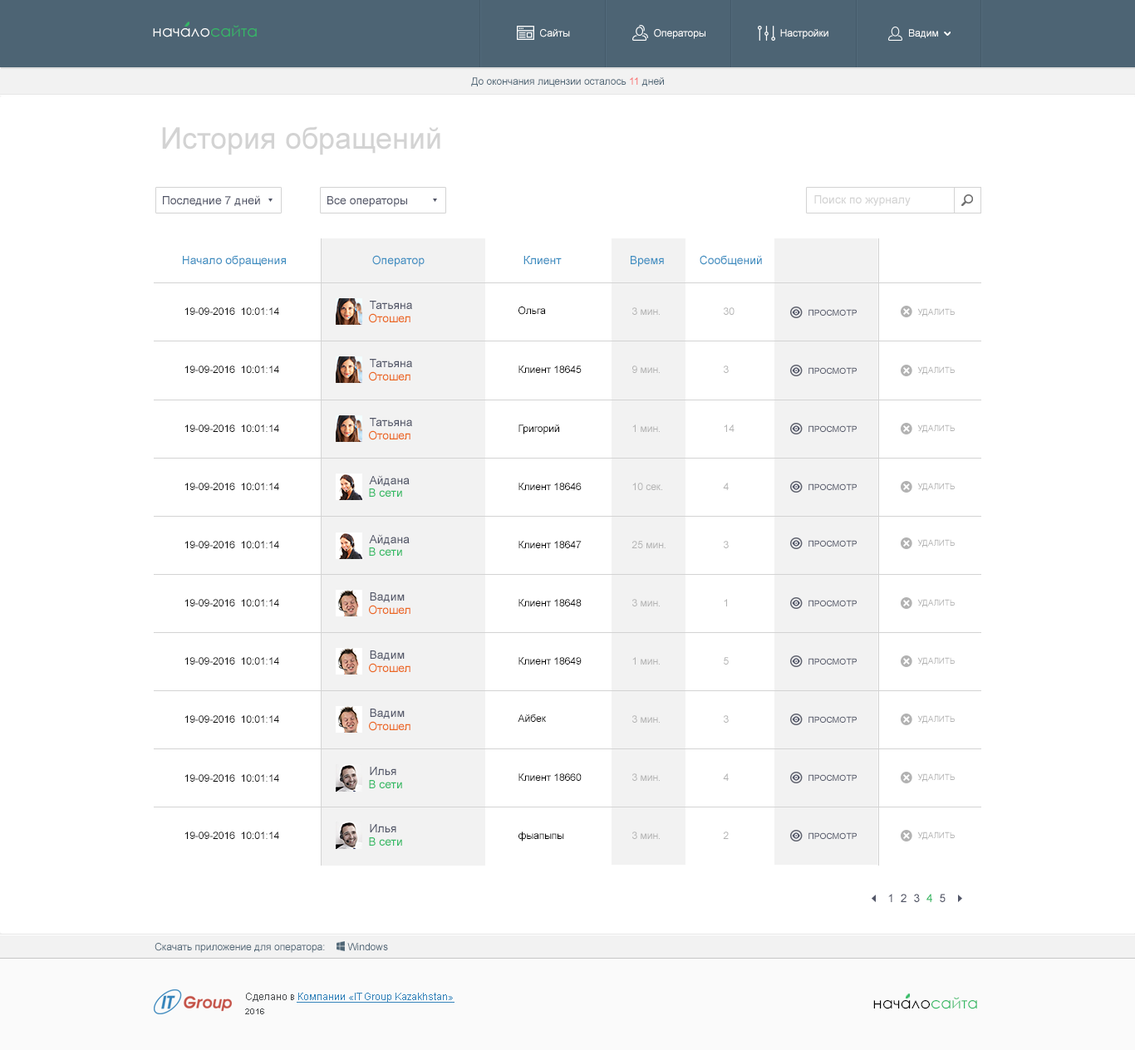
<style>
.page{position:relative;width:1135px;height:1050px;background:#ffffff}
.page>*{position:absolute;margin:0}
.t1{font:15.4px "CenturyGothic";color:#ffffff}
.t2{font:15.4px "CenturyGothic";color:#34ba65}
.t3{font:10px "ArialMT";color:#ffffff}
.t4{font:10px "ArialMT";color:#4d6474}
.t5{font:10px "ArialMT";color:#f96969}
.t6{font:29.9px "ArialMT";color:#d3d3d3}
.t7{font:11.6px "ArialMT";color:#515567}
.t8{font:11.6px "ArialMT";color:#d3d3d3}
.t9{font:11.6px "ArialMT";color:#3d8ec1}
.t10{font:10px "ArialMT";color:#000000}
.t11{font:11.6px "ArialMT";color:#eb6821}
.t12{font:10px "ArialMT";color:#b2b2b2}
.t13{font:8.3px "ArialMT";color:#515567;scale:1.03 1}
.t14{font:8.3px "ArialMT";color:#b2b2b2}
.t15{font:11.6px "ArialMT";color:#34ba65}
.t16{font:10px "ArialMT";color:#3483ba;text-decoration:underline}
.t17{font:10px "ArialMT";color:#4a4d4f}
.t18{font:15.4px "CenturyGothic";color:#000000}
.t19{font:8.3px "Arial-BoldMT";color:#4a4d4f}
</style>
<div class="page">
<p class="t1" style="left:153px;top:25px;width:104px;height:12px">начало<span class="t2">сайта</span></p>
<p class="t3" style="left:540px;top:29px;width:30px;height:8px">Сайты</p>
<p class="t3" style="left:654px;top:29px;width:52px;height:10px">Операторы</p>
<p class="t3" style="left:780px;top:29px;width:49px;height:10px">Настройки</p>
<p class="t3" style="left:909px;top:29px;width:29px;height:9px">Вадим</p>
<p class="t4" style="left:471px;top:77px;width:193px;height:10px">До окончания лицензии осталось <span class="t5">11</span> дней</p>
<p class="t6" style="left:162px;top:126px;width:278px;height:29px">История обращений</p>
<p class="t7" style="left:163px;top:195px;width:97px;height:11px">Последние 7 дней</p>
<p class="t7" style="left:327px;top:196px;width:80px;height:11px">Все операторы</p>
<p class="t8" style="left:814px;top:195px;width:97px;height:11px">Поиск по журналу</p>
<p class="t9" style="left:183px;top:255px;width:103px;height:12px">Начало обращения</p>
<p class="t9" style="left:372px;top:255px;width:53px;height:12px">Оператор</p>
<p class="t9" style="left:524px;top:256px;width:38px;height:8px">Клиент</p>
<p class="t9" style="left:631px;top:256px;width:33px;height:11px">Время</p>
<p class="t9" style="left:700px;top:255px;width:62px;height:11px">Сообщений</p>
<p class="t7" style="left:370px;top:301px;width:42px;height:8px">Татьяна</p>
<p class="t10" style="left:184px;top:307px;width:95px;height:8px">19-09-2016  10:01:14</p>
<p class="t11" style="left:369px;top:313px;width:42px;height:10px">Отошел</p>
<p class="t10" style="left:519px;top:307px;width:27px;height:8px">Ольга</p>
<p class="t12" style="left:632px;top:307px;width:28px;height:8px">3 мин.</p>
<p class="t12" style="left:724px;top:307px;width:11px;height:8px">30</p>
<p class="t13" style="left:809px;top:309px;width:48px;height:7px">ПРОСМОТР</p>
<p class="t14" style="left:917px;top:308px;width:38px;height:9px">УДАЛИТЬ</p>
<p class="t10" style="left:184px;top:366px;width:95px;height:7px">19-09-2016  10:01:14</p>
<p class="t7" style="left:370px;top:359px;width:42px;height:8px">Татьяна</p>
<p class="t10" style="left:519px;top:366px;width:63px;height:7px">Клиент 18645</p>
<p class="t12" style="left:632px;top:366px;width:28px;height:7px">9 мин.</p>
<p class="t12" style="left:724px;top:366px;width:5px;height:7px">3</p>
<p class="t11" style="left:369px;top:371px;width:42px;height:10px">Отошел</p>
<p class="t13" style="left:809px;top:367px;width:48px;height:7px">ПРОСМОТР</p>
<p class="t14" style="left:917px;top:366px;width:38px;height:9px">УДАЛИТЬ</p>
<p class="t10" style="left:184px;top:425px;width:95px;height:7px">19-09-2016  10:01:14</p>
<p class="t7" style="left:370px;top:418px;width:42px;height:8px">Татьяна</p>
<p class="t10" style="left:519px;top:425px;width:40px;height:10px">Григорий</p>
<p class="t12" style="left:632px;top:425px;width:28px;height:7px">1 мин.</p>
<p class="t12" style="left:724px;top:425px;width:11px;height:7px">14</p>
<p class="t13" style="left:809px;top:425px;width:48px;height:7px">ПРОСМОТР</p>
<p class="t14" style="left:917px;top:425px;width:38px;height:8px">УДАЛИТЬ</p>
<p class="t11" style="left:369px;top:430px;width:42px;height:10px">Отошел</p>
<p class="t10" style="left:184px;top:483px;width:95px;height:7px">19-09-2016  10:01:14</p>
<p class="t7" style="left:369px;top:475px;width:41px;height:11px">Айдана</p>
<p class="t10" style="left:519px;top:483px;width:63px;height:7px">Клиент 18646</p>
<p class="t12" style="left:632px;top:483px;width:30px;height:7px">10 сек.</p>
<p class="t12" style="left:723px;top:483px;width:6px;height:7px">4</p>
<p class="t13" style="left:809px;top:484px;width:48px;height:6px">ПРОСМОТР</p>
<p class="t14" style="left:917px;top:483px;width:38px;height:8px">УДАЛИТЬ</p>
<p class="t15" style="left:369px;top:489px;width:33px;height:8px">В сети</p>
<p class="t10" style="left:184px;top:541px;width:95px;height:7px">19-09-2016  10:01:14</p>
<p class="t7" style="left:369px;top:534px;width:41px;height:11px">Айдана</p>
<p class="t10" style="left:519px;top:541px;width:63px;height:7px">Клиент 18647</p>
<p class="t12" style="left:632px;top:541px;width:34px;height:7px">25 мин.</p>
<p class="t12" style="left:724px;top:541px;width:5px;height:7px">3</p>
<p class="t13" style="left:809px;top:540px;width:48px;height:7px">ПРОСМОТР</p>
<p class="t14" style="left:917px;top:539px;width:38px;height:9px">УДАЛИТЬ</p>
<p class="t15" style="left:369px;top:548px;width:33px;height:8px">В сети</p>
<p class="t7" style="left:370px;top:593px;width:35px;height:9px">Вадим</p>
<p class="t10" style="left:184px;top:599px;width:95px;height:8px">19-09-2016  10:01:14</p>
<p class="t11" style="left:369px;top:605px;width:42px;height:10px">Отошел</p>
<p class="t10" style="left:519px;top:599px;width:63px;height:8px">Клиент 18648</p>
<p class="t12" style="left:632px;top:599px;width:28px;height:8px">3 мин.</p>
<p class="t12" style="left:724px;top:599px;width:3px;height:8px">1</p>
<p class="t13" style="left:809px;top:600px;width:48px;height:7px">ПРОСМОТР</p>
<p class="t14" style="left:917px;top:599px;width:38px;height:8px">УДАЛИТЬ</p>
<p class="t7" style="left:370px;top:651px;width:35px;height:10px">Вадим</p>
<p class="t10" style="left:184px;top:657px;width:95px;height:8px">19-09-2016  10:01:14</p>
<p class="t11" style="left:369px;top:663px;width:42px;height:10px">Отошел</p>
<p class="t10" style="left:519px;top:657px;width:63px;height:8px">Клиент 18649</p>
<p class="t12" style="left:632px;top:657px;width:28px;height:8px">1 мин.</p>
<p class="t12" style="left:724px;top:657px;width:5px;height:8px">5</p>
<p class="t13" style="left:809px;top:658px;width:48px;height:7px">ПРОСМОТР</p>
<p class="t14" style="left:917px;top:657px;width:38px;height:9px">УДАЛИТЬ</p>
<p class="t7" style="left:370px;top:709px;width:35px;height:10px">Вадим</p>
<p class="t10" style="left:184px;top:716px;width:95px;height:7px">19-09-2016  10:01:14</p>
<p class="t11" style="left:369px;top:721px;width:42px;height:10px">Отошел</p>
<p class="t10" style="left:518px;top:715px;width:28px;height:7px">Айбек</p>
<p class="t12" style="left:632px;top:716px;width:28px;height:7px">3 мин.</p>
<p class="t12" style="left:724px;top:716px;width:5px;height:7px">3</p>
<p class="t13" style="left:809px;top:716px;width:48px;height:7px">ПРОСМОТР</p>
<p class="t14" style="left:917px;top:716px;width:38px;height:8px">УДАЛИТЬ</p>
<p class="t7" style="left:370px;top:767px;width:26px;height:8px">Илья</p>
<p class="t10" style="left:519px;top:774px;width:63px;height:7px">Клиент 18660</p>
<p class="t12" style="left:632px;top:774px;width:28px;height:7px">3 мин.</p>
<p class="t12" style="left:723px;top:774px;width:6px;height:7px">4</p>
<p class="t14" style="left:917px;top:774px;width:38px;height:8px">УДАЛИТЬ</p>
<p class="t10" style="left:184px;top:775px;width:95px;height:7px">19-09-2016  10:01:14</p>
<p class="t15" style="left:369px;top:780px;width:33px;height:9px">В сети</p>
<p class="t13" style="left:809px;top:775px;width:48px;height:6px">ПРОСМОТР</p>
<p class="t10" style="left:184px;top:832px;width:95px;height:7px">19-09-2016  10:01:14</p>
<p class="t7" style="left:370px;top:824px;width:26px;height:9px">Илья</p>
<p class="t10" style="left:519px;top:832px;width:45px;height:10px">фыапыпы</p>
<p class="t12" style="left:632px;top:832px;width:28px;height:7px">3 мин.</p>
<p class="t12" style="left:723px;top:832px;width:6px;height:7px">2</p>
<p class="t13" style="left:809px;top:833px;width:48px;height:6px">ПРОСМОТР</p>
<p class="t14" style="left:917px;top:832px;width:38px;height:8px">УДАЛИТЬ</p>
<p class="t15" style="left:369px;top:838px;width:33px;height:8px">В сети</p>
<p class="t7" style="left:888px;top:894px;width:58px;height:9px">1  2  3  <span class="t15">4</span>  5</p>
<p class="t4" style="left:155px;top:943px;width:233px;height:10px">Скачать приложение для оператора:        Windows</p>
<p class="t16" style="left:246px;top:993px;width:209px;height:10px"><span class="t17">Сделано в </span>Компании «IT Group Kazakhstan»</p>
<p class="t18" style="left:873px;top:997px;width:104px;height:13px">начало<span class="t2">сайта</span></p>
<p class="t19" style="left:245px;top:1009px;width:19px;height:6px">2016</p>
</div>
